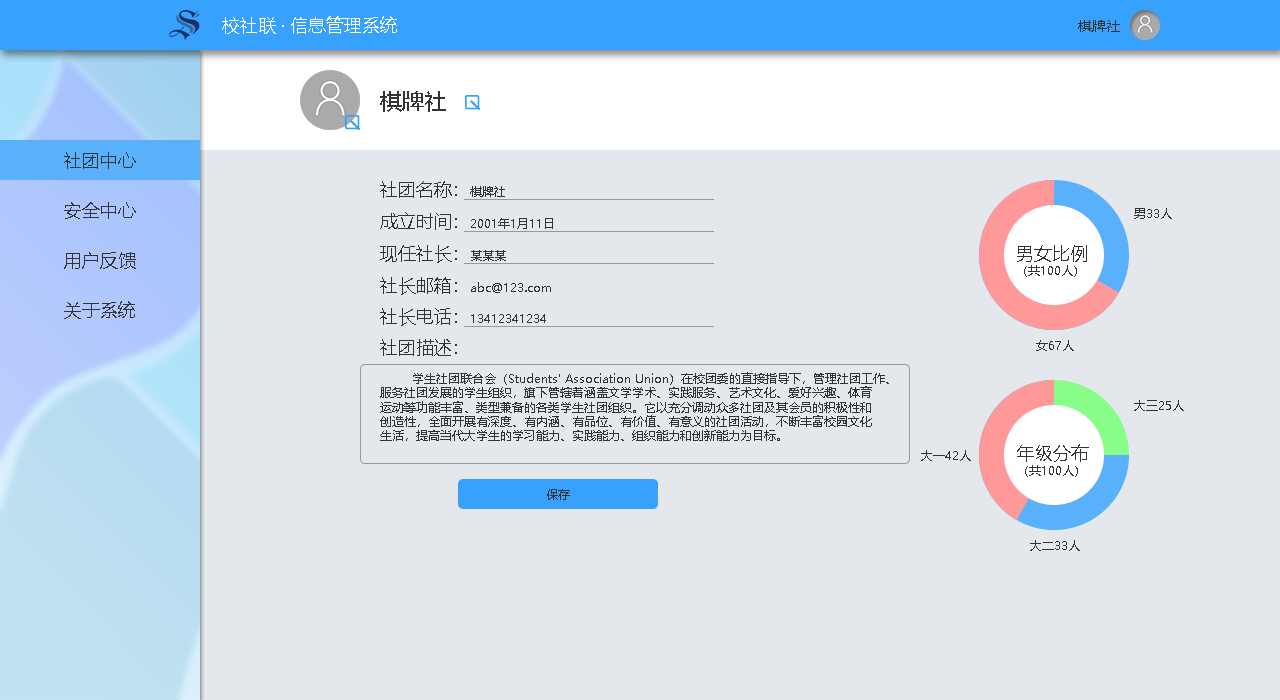
<style>
.page{position:relative;width:1280px;height:700px;background:#e4e8ec}
.page>*{position:absolute;margin:0}
.t1{font:18px "MicrosoftYaHei";color:#ffffff}
.t2{font:14px "MicrosoftYaHei";color:#333333}
.t3{font:22px "MicrosoftYaHei";color:#333333}
.t4{font:18px "MicrosoftYaHei";color:#333333}
.t5{font:12px "MicrosoftYaHei";color:#333333}
</style>
<div class="page">
<p class="t1" style="left:222px;top:16px;width:175px;height:18px">校社联 · 信息管理系统</p>
<p class="t2" style="left:1078px;top:20px;width:42px;height:12px">棋牌社</p>
<p class="t3" style="left:380px;top:91px;width:66px;height:21px">棋牌社</p>
<p class="t4" style="left:64px;top:152px;width:72px;height:17px">社团中心</p>
<p class="t4" style="left:380px;top:181px;width:125px;height:17px">社团名称：<span class="t5">棋牌社</span></p>
<p class="t4" style="left:64px;top:202px;width:72px;height:17px">安全中心</p>
<p class="t5" style="left:1134px;top:208px;width:38px;height:11px">男33人</p>
<p class="t5" style="left:380px;top:212px;width:173px;height:18px"><span class="t4">成立时间：</span>2001年1月11日</p>
<p class="t4" style="left:380px;top:245px;width:126px;height:18px">现任社长：<span class="t5">某某某</span></p>
<p class="t5" style="left:1017px;top:245px;width:70px;height:32px"><span class="t4">男女比例<br></span>（共100人）</p>
<p class="t4" style="left:64px;top:252px;width:72px;height:17px">用户反馈</p>
<p class="t5" style="left:380px;top:277px;width:171px;height:18px"><span class="t4">社长邮箱：</span>abc@123.com</p>
<p class="t4" style="left:64px;top:301px;width:71px;height:18px">关于系统</p>
<p class="t5" style="left:380px;top:308px;width:166px;height:18px"><span class="t4">社长电话：</span>13412341234</p>
<p class="t5" style="left:380px;top:339px;width:509px;height:102px"><span class="t4">社团描述：<br></span>         <br>        学生社团联合会（Students' Association Union）在校团委的直接指导下，管理社团工作、<br>服务社团发展的学生组织，旗下管辖着涵盖文学学术、实践服务、艺术文化、爱好兴趣、体育<br>运动等功能丰富、类型兼备的各类学生社团组织。它以充分调动众多社团及其会员的积极性和<br>创造性，全面开展有深度、有内涵、有品位、有价值、有意义的社团活动，不断丰富校园文化<br>生活，提高当代大学生的学习能力、实践能力、组织能力和创新能力为目标。</p>
<p class="t5" style="left:1036px;top:340px;width:38px;height:11px">女67人</p>
<p class="t5" style="left:1134px;top:400px;width:50px;height:11px">大三25人</p>
<p class="t5" style="left:1017px;top:444px;width:72px;height:33px"><span class="t4">年级分布<br></span>（共100人）</p>
<p class="t5" style="left:921px;top:450px;width:50px;height:11px">大一42人</p>
<p class="t5" style="left:547px;top:489px;width:23px;height:11px">保存</p>
<p class="t5" style="left:1030px;top:540px;width:50px;height:11px">大二33人</p>
</div>
